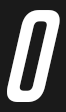
<style>
.page{position:relative;width:66px;height:112px;background:#1a1a1a}
.page>*{position:absolute;margin:0}
.t1{font:128px "BigNoodleTitling-Oblique";color:#ffffff;font-style:italic}
</style>
<div class="page">
<p class="t1" style="left:7px;top:10px;width:53px;height:92px">0</p>
</div>
